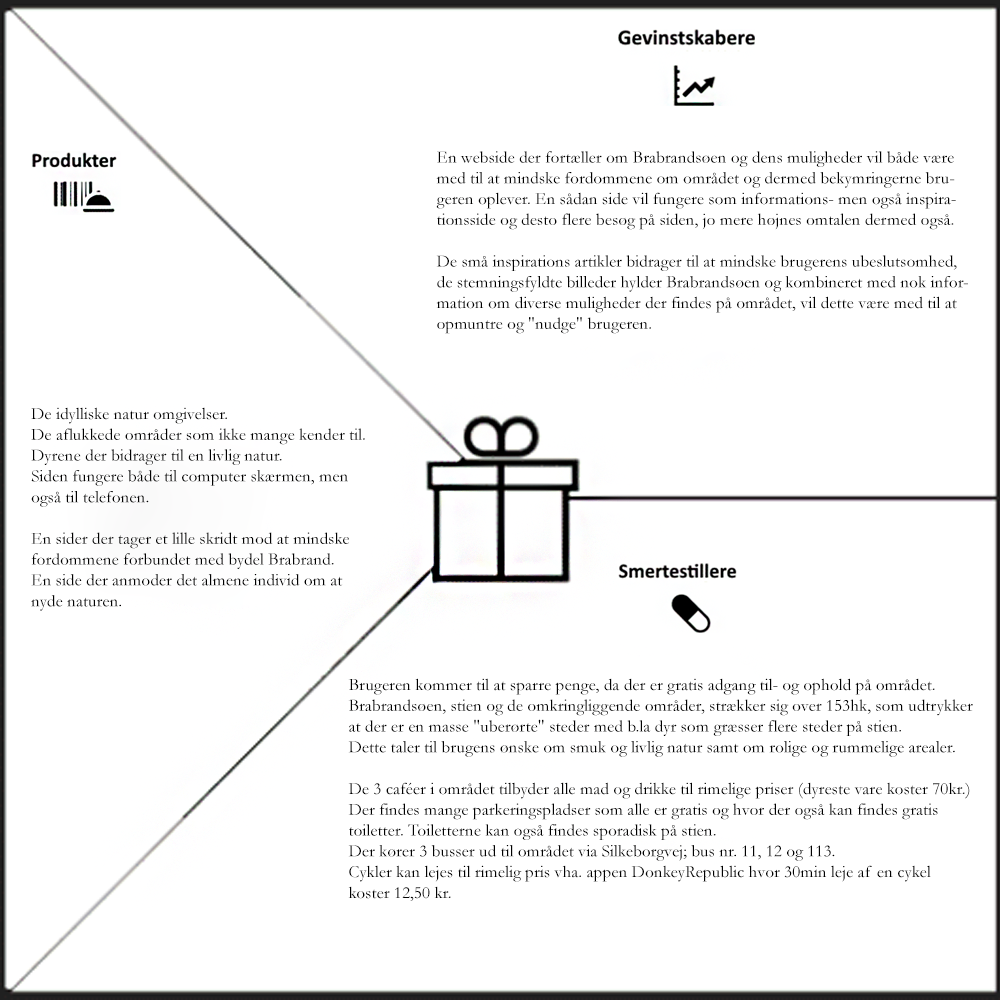
<style>
.page{position:relative;width:1000px;height:1000px;background:#ffffff}
.page>*{position:absolute;margin:0}
.t1{font:17.3px "Garamond";color:#010101}
</style>
<div class="page">
<p class="t1" style="left:436px;top:151px;width:532px;height:183px">En webside der fortæller om Brabrandsøen og dens muligheder vil både være med til at mindske fordommene om området og dermed bekymringerne brugeren oplever. En sådan side vil fungere som informations- men også inspirationsside og desto flere besøg på siden, jo mere højnes omtalen dermed også.<br><br>De små inspirations artikler bidrager til at mindske brugerens ubeslutsomhed, de stemningsfyldte billeder hylder Brabrandsøen og kombineret med nok information om diverse muligheder der findes på området, vil dette være med til at opmuntre og "nudge" brugeren.</p>
<p class="t1" style="left:31px;top:407px;width:334px;height:204px">De idylliske natur omgivelser.<br>De aflukkede områder som ikke mange kender til.<br>Dyrene der bidrager til en livlig natur.<br>Siden fungere både til computer skærmen, men også til telefonen.<br><br>En sider der tager et lille skridt mod at mindske fordommene forbundet med bydel Brabrand.<br>En side der anmoder det almene individ om at nyde naturen.</p>
<p class="t1" style="left:348px;top:678px;width:625px;height:223px">Brugeren kommer til at sparre penge, da der er gratis adgang til- og ophold på området.<br>Brabrandsøen, stien og de omkringliggende områder, strækker sig over 153hk, som udtrykker at der er en masse "uberørte" steder med b.la dyr som græsser flere steder på stien.<br>Dette taler til brugens ønske om smuk og livlig natur samt om rolige og rummelige arealer.  <br><br>De 3 caféer i området tilbyder alle mad og drikke til rimelige priser (dyreste vare koster 70kr.)<br>Der findes mange parkeringspladser som alle er gratis og hvor der også kan findes gratis<br>toiletter. Toiletterne kan også findes sporadisk på stien.<br>Der kører 3 busser ud til området via Silkeborgvej; bus nr. 11, 12 og 113.<br>Cykler kan lejes til rimelig pris vha. appen DonkeyRepublic hvor 30min leje af en cykel koster 12,50 kr.</p>
</div>
